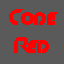
<style>
.page{position:relative;width:64px;height:64px;background:#5a5a5a}
.page>*{position:absolute;margin:0}
.t1{font:24px "Slant";color:#ff0000}
</style>
<div class="page">
<p class="t1" style="left:9px;top:9px;width:49px;height:44px;text-align:center">Code<br>Red</p>
</div>
